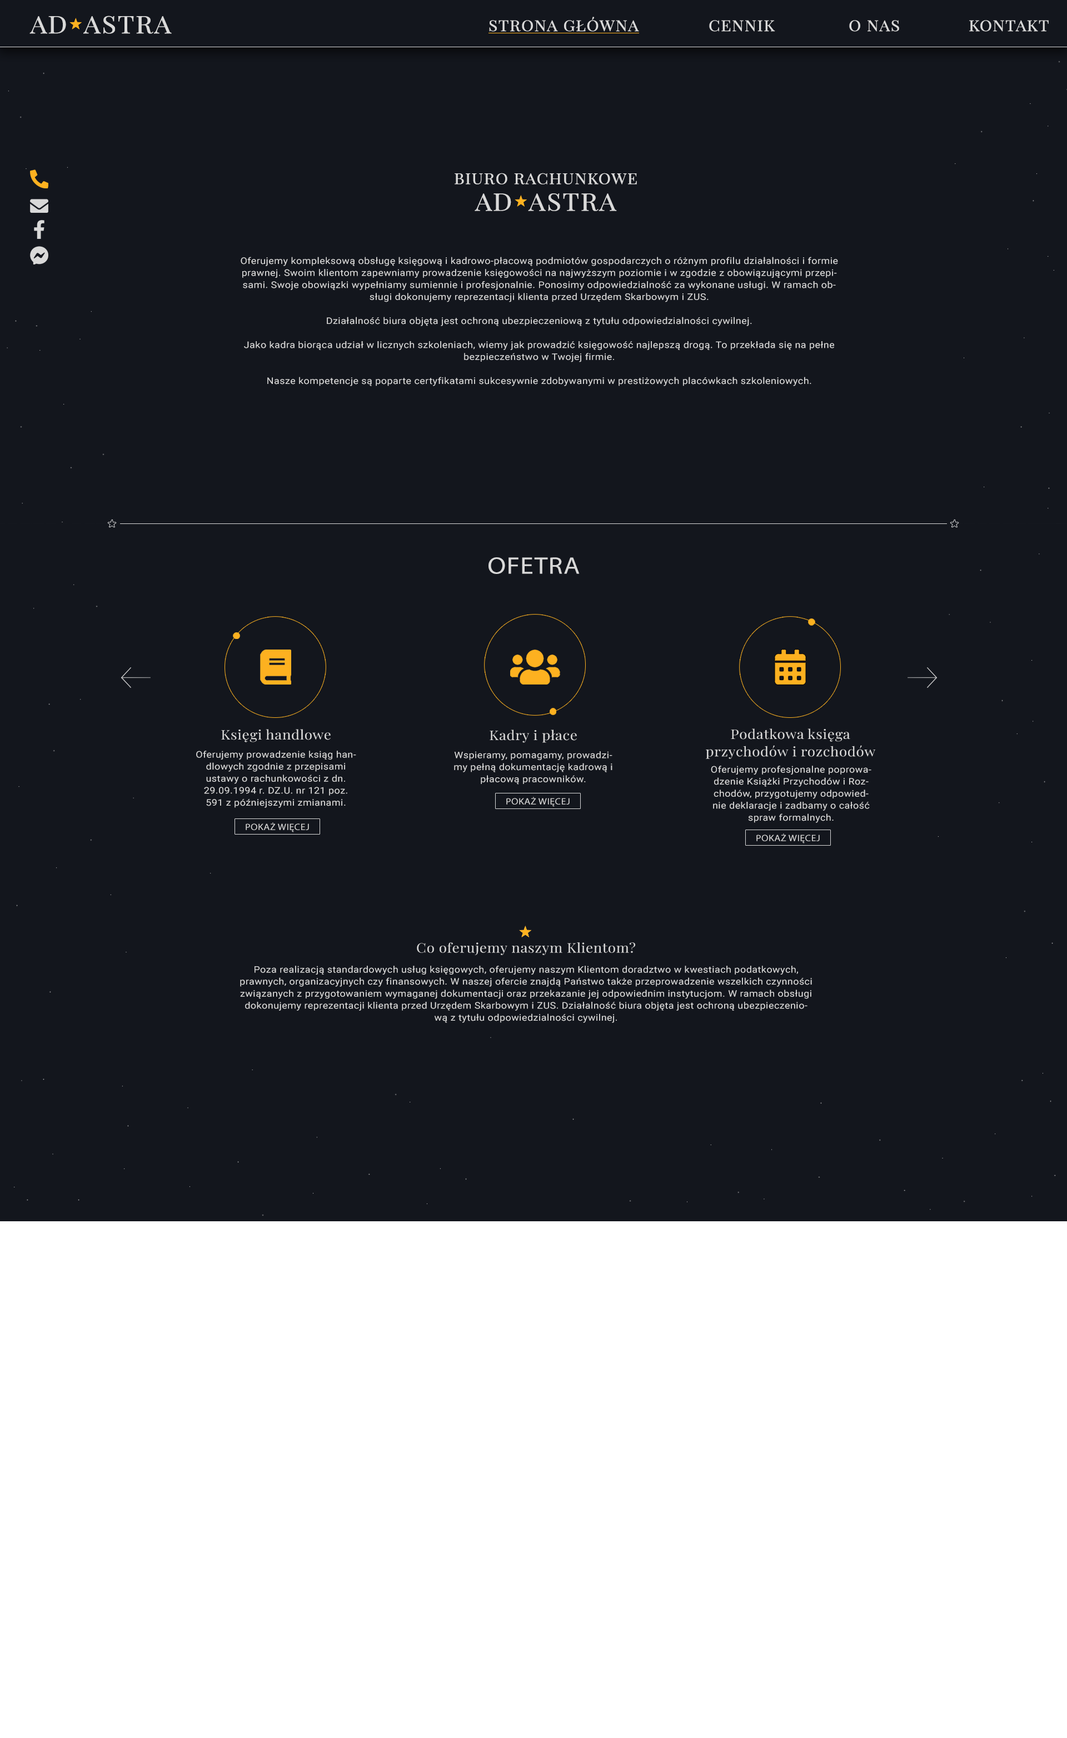
<style>
.page{position:relative;width:1067px;height:1738px;background:#13161d}
.page>*{position:absolute;margin:0}
.t1{font:24px "PlayfairDisplay-Regular";letter-spacing:0.025em;color:#d9d9d9;text-transform:uppercase;font-weight:bold;scale:1.11 1}
.t2{font:15px "PlayfairDisplay-Regular";letter-spacing:0.025em;color:#d9d9d9;text-transform:uppercase;font-weight:bold;scale:1.11 1}
.t3{font:15px/16.7px "PlayfairDisplay-Regular";letter-spacing:0.025em;color:#d9d9d9;text-transform:uppercase;font-weight:bold;scale:1.11 1}
.t4{font:24px/26.7px "PlayfairDisplay-Regular";letter-spacing:0.025em;color:#d9d9d9;text-transform:uppercase;font-weight:bold;scale:1.11 1}
.t5{font:9px "Roboto-Regular";letter-spacing:0.025em;color:#d9d9d9;scale:1.11 1}
.t6{font:24px "MyriadPro-Regular";letter-spacing:0.025em;color:#d9d9d9;scale:1.11 1}
.t7{font:13px "PlayfairDisplay-Regular";letter-spacing:0.025em;color:#d9d9d9;scale:1.11 1}
.t8{font:9px "MyriadPro-Regular";letter-spacing:0.025em;color:#d9d9d9;text-transform:uppercase;scale:1.11 1}
.t9{font:13px/10px "PlayfairDisplay-Regular";letter-spacing:0.025em;color:#d9d9d9;scale:1.11 1}
.t10{font:9px/20px "Roboto-Regular";letter-spacing:0.025em;color:#d9d9d9;scale:1.11 1}
</style>
<div class="page">
<p class="t1" style="left:29px;top:16px;width:143px;height:18px">AD  ASTRA</p>
<p class="t2" style="left:489px;top:17px;width:559px;height:15px">Strona Główna    cennik    o nas    kontakt</p>
<p class="t3" style="left:454px;top:173px;width:183px;height:38px;text-align:center">biuro rachunkowe <br><span class="t4">ad  astra</span></p>
<p class="t5" style="left:241px;top:257px;width:597px;height:129px;text-align:center">Oferujemy kompleksową obsługę księgową i kadrowo-płacową podmiotów gospodarczych o różnym profilu działalności i formie prawnej. Swoim klientom zapewniamy prowadzenie księgowości na najwyższym poziomie i w zgodzie z obowiązującymi przepisami. Swoje obowiązki wypełniamy sumiennie i profesjonalnie. Ponosimy odpowiedzialność za wykonane usługi. W ramach obsługi dokonujemy reprezentacji klienta przed Urzędem Skarbowym i ZUS.<br><br>Działalność biura objęta jest ochroną ubezpieczeniową z tytułu odpowiedzialności cywilnej.<br><br>Jako kadra biorąca udział w licznych szkoleniach, wiemy jak prowadzić księgowość najlepszą drogą. To przekłada się na pełne bezpieczeństwo w Twojej firmie.<br><br>Nasze kompetencje są poparte certyfikatami sukcesywnie zdobywanymi w prestiżowych placówkach szkoleniowych.</p>
<p class="t6" style="left:488px;top:557px;width:91px;height:17px">OFETRA</p>
<p class="t7" style="left:221px;top:729px;width:110px;height:13px">Księgi handlowe</p>
<p class="t7" style="left:489px;top:729px;width:88px;height:14px">Kadry i płace</p>
<p class="t7" style="left:706px;top:728px;width:170px;height:31px;text-align:center">Podatkowa księga <br>przychodów i rozchodów</p>
<p class="t5" style="left:196px;top:751px;width:160px;height:57px;text-align:center">Oferujemy prowadzenie ksiąg handlowych zgodnie z przepisami ustawy o rachunkowości z dn. 29.09.1994 r. DZ.U. nr 121 poz. 591 z późniejszymi zmianami.</p>
<p class="t5" style="left:454px;top:751px;width:158px;height:33px;text-align:center">Wspieramy, pomagamy, prowadzimy pełną dokumentację kadrową i płacową pracowników.</p>
<p class="t5" style="left:711px;top:766px;width:160px;height:57px;text-align:center">Oferujemy profesjonalne poprowadzenie Książki Przychodów i Rozchodów, przygotujemy odpowiednie deklaracje i zadbamy o całość spraw formalnych.</p>
<p class="t8" style="left:506px;top:797px;width:63px;height:10px">Pokaż więcej</p>
<p class="t8" style="left:246px;top:822px;width:63px;height:10px">Pokaż więcej</p>
<p class="t8" style="left:756px;top:833px;width:63px;height:10px">Pokaż więcej</p>
<p class="t5" style="left:240px;top:942px;width:572px;height:81px;text-align:center"><span class="t9">Co oferujemy naszym Klientom?<br></span><span class="t10">Poza realizacją standardowych usług księgowych, oferujemy naszym Klientom doradztwo w kwestiach podatkowych, </span>prawnych, organizacyjnych czy finansowych. W naszej ofercie znajdą Państwo także przeprowadzenie wszelkich czynności związanych z przygotowaniem wymaganej dokumentacji oraz przekazanie jej odpowiednim instytucjom. W ramach obsługi dokonujemy reprezentacji klienta przed Urzędem Skarbowym i ZUS. Działalność biura objęta jest ochroną ubezpieczeniową z tytułu odpowiedzialności cywilnej.</p>
</div>
